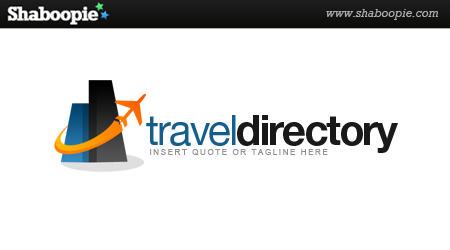
<style>
.page{position:relative;width:450px;height:250px;background:#ffffff}
.page>*{position:absolute;margin:0}
.t1{font:42px "HelveticaNeueLTStd-Bd";letter-spacing:-0.05em;color:#191919}
.t2{font:42px "HelveticaNeueLTStd-Roman";letter-spacing:-0.05em;color:#135e8d}
.t3{font:8px "ArialMT";letter-spacing:0.2em;color:#919191}
</style>
<div class="page">
<p class="t1" style="left:146px;top:115px;width:252px;height:38px"><span class="t2">travel</span>directory</p>
<p class="t3" style="left:150px;top:149px;width:178px;height:7px">INSERT QUOTE OR TAGLINE HERE</p>
</div>
